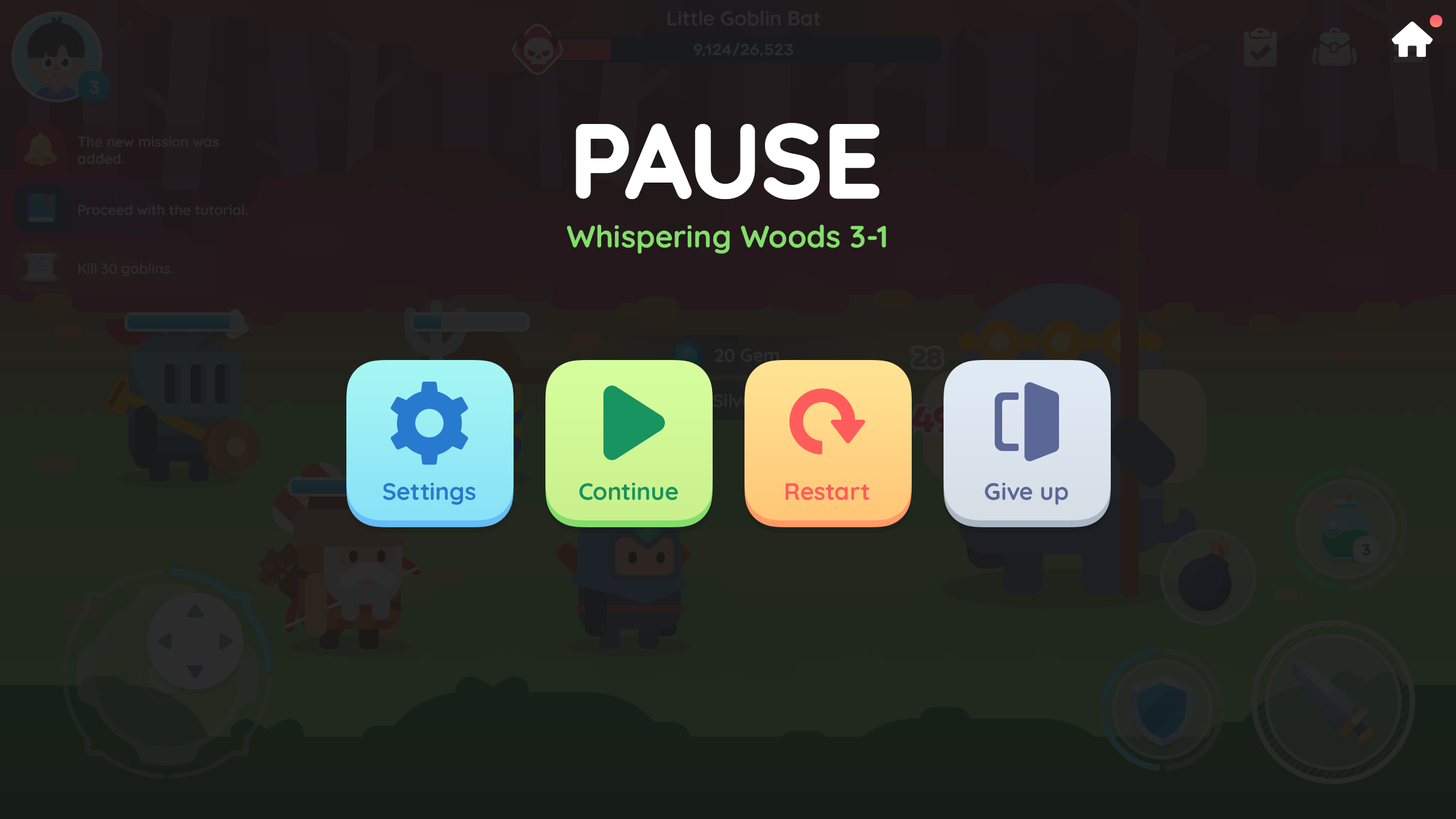
<style>
.page{position:relative;width:1456px;height:819px}
.page>*{position:absolute;margin:0}
.t1{font:102.4px "Quicksand-Bold";color:#ffffff;text-transform:uppercase;font-weight:bold}
.t2{font:30.7px "Quicksand-Bold";letter-spacing:0.01em;color:#84de6b}
.t3{font:23.9px "Quicksand-Bold";color:#277ace}
.t4{font:23.9px "Quicksand-Bold";color:#179460}
.t5{font:23.9px "Quicksand-Bold";color:#ff5c5c}
.t6{font:23.9px "Quicksand-Bold";color:#5b6797}
</style>
<div class="page">
<p class="t1" style="left:576px;top:123px;width:303px;height:77px">Pause</p>
<p class="t2" style="left:566px;top:225px;width:320px;height:29px">Whispering Woods 3-1</p>
<p class="t3" style="left:383px;top:482px;width:92px;height:23px">Settings</p>
<p class="t4" style="left:579px;top:482px;width:99px;height:18px">Continue</p>
<p class="t5" style="left:785px;top:483px;width:85px;height:17px">Restart</p>
<p class="t6" style="left:984px;top:482px;width:84px;height:23px">Give up</p>
</div>
